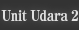
<style>
.page{position:relative;width:79px;height:30px}
.page>*{position:absolute;margin:0}
.t1{font:15px "RyuminPro-ExBold";letter-spacing:-0.04em;color:#dfdfdf;scale:0.9 1}
</style>
<div class="page">
<p class="t1" style="left:1px;top:10px;width:77px;height:11px">Unit Udara 2</p>
</div>
